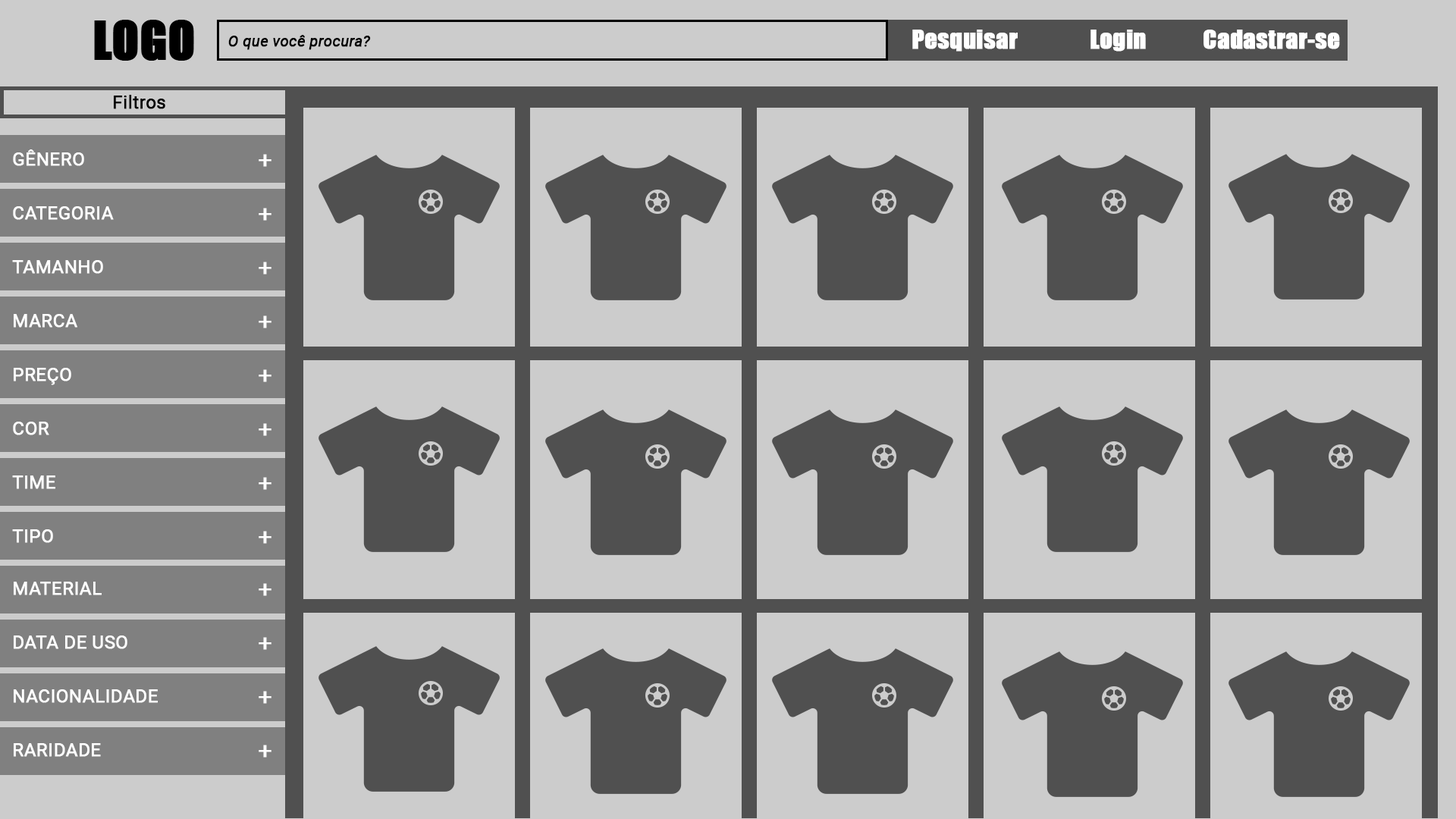
<style>
.page{position:relative;width:1456px;height:819px;background:#cccccc}
.page>*{position:absolute;margin:0}
.t1{font:24.3px "Impact";color:#ffffff;font-weight:bold}
.t2{font:15.2px "Roboto-Italic";color:#000000;font-weight:bold}
.t3{font:18.2px "Roboto-Regular";color:#000000;font-weight:bold}
.t4{font:18.2px "Roboto-Regular";color:#ffffff;font-weight:bold}
.t5{font:24.3px "Roboto-Regular";color:#ffffff;font-weight:bold}
</style>
<div class="page">
<p class="t1" style="left:912px;top:30px;width:106px;height:22px">Pesquisar</p>
<p class="t1" style="left:1090px;top:30px;width:56px;height:22px">Login</p>
<p class="t1" style="left:1203px;top:30px;width:137px;height:19px">Cadastrar-se</p>
<p class="t2" style="left:228px;top:35px;width:143px;height:15px">O que você procura?</p>
<p class="t3" style="left:114px;top:95px;width:51px;height:14px">Filtros</p>
<p class="t4" style="left:13px;top:149px;width:71px;height:17px">GÊNERO</p>
<p class="t5" style="left:259px;top:154px;width:12px;height:13px">+</p>
<p class="t4" style="left:13px;top:206px;width:101px;height:14px">CATEGORIA</p>
<p class="t5" style="left:259px;top:208px;width:12px;height:13px">+</p>
<p class="t4" style="left:12px;top:260px;width:91px;height:14px">TAMANHO</p>
<p class="t5" style="left:259px;top:262px;width:12px;height:13px">+</p>
<p class="t4" style="left:14px;top:314px;width:63px;height:14px">MARCA</p>
<p class="t5" style="left:259px;top:315px;width:12px;height:13px">+</p>
<p class="t4" style="left:14px;top:368px;width:57px;height:17px">PREÇO</p>
<p class="t5" style="left:259px;top:369px;width:12px;height:13px">+</p>
<p class="t4" style="left:13px;top:422px;width:36px;height:13px">COR</p>
<p class="t5" style="left:259px;top:423px;width:12px;height:13px">+</p>
<p class="t4" style="left:12px;top:475px;width:43px;height:14px">TIME</p>
<p class="t5" style="left:259px;top:477px;width:12px;height:13px">+</p>
<p class="t4" style="left:12px;top:529px;width:41px;height:14px">TIPO</p>
<p class="t5" style="left:259px;top:531px;width:12px;height:13px">+</p>
<p class="t4" style="left:14px;top:582px;width:88px;height:13px">MATERIAL</p>
<p class="t5" style="left:259px;top:583px;width:12px;height:13px">+</p>
<p class="t4" style="left:14px;top:635px;width:113px;height:14px">DATA DE USO</p>
<p class="t5" style="left:259px;top:637px;width:12px;height:13px">+</p>
<p class="t4" style="left:14px;top:689px;width:144px;height:14px">NACIONALIDADE</p>
<p class="t5" style="left:259px;top:691px;width:12px;height:13px">+</p>
<p class="t4" style="left:14px;top:743px;width:87px;height:14px">RARIDADE</p>
<p class="t5" style="left:259px;top:745px;width:12px;height:13px">+</p>
</div>
